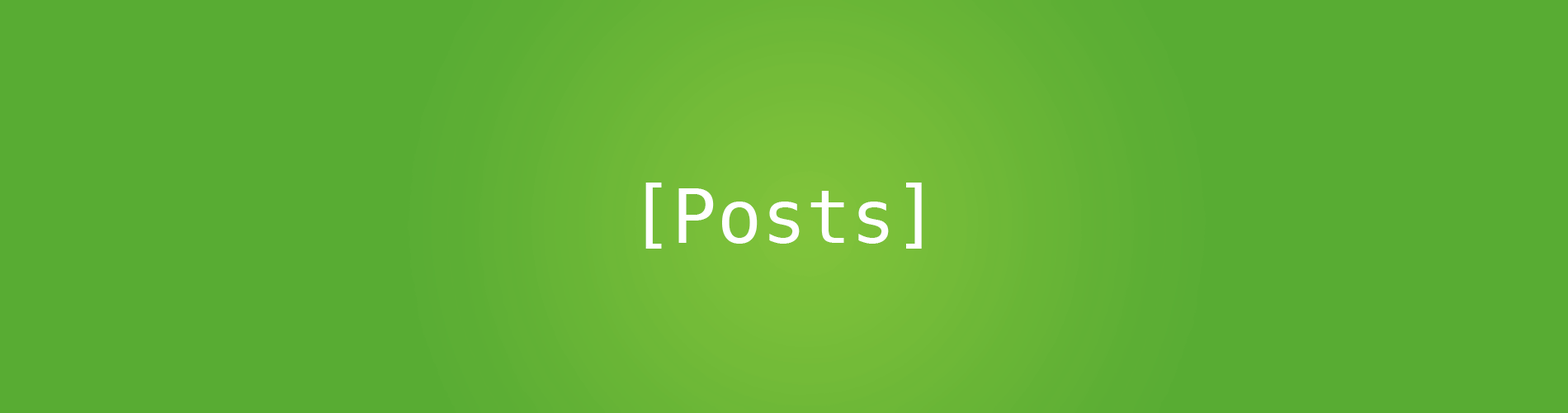
<style>
.page{position:relative;width:1568px;height:413px;background:#58ac33}
.page>*{position:absolute;margin:0}
.t1{font:74.3px "Menlo-Regular";color:#ffffff}
</style>
<div class="page">
<p class="t1" style="left:645px;top:182px;width:277px;height:66px">[Posts]</p>
</div>
